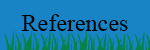
<style>
.page{position:relative;width:150px;height:50px;background:#1883c5}
.page>*{position:absolute;margin:0}
.t1{font:24px "TimesNewRomanPSMT";color:#000000}
</style>
<div class="page">
<p class="t1" style="left:21px;top:14px;width:107px;height:17px">References</p>
</div>
